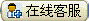
<style>
.page{position:relative;width:89px;height:21px}
.page>*{position:absolute;margin:0}
.t1{font:14px "SimSun";color:#000000}
</style>
<div class="page">
<p class="t1" style="left:26px;top:4px;width:55px;height:13px">在线客服</p>
</div>
